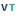
<style>
.page{position:relative;width:16px;height:16px;background:#ffffff}
.page>*{position:absolute;margin:0}
.t1{font:9.9px "MyriadPro-Bold";color:#2c3e50;scale:1.11 1}
.t2{font:9.9px "MyriadPro-Bold";color:#18bc9c;scale:1.11 1}
</style>
<div class="page">
<p class="t1" style="left:1px;top:4px;width:14px;height:7px">V <span class="t2">T</span></p>
</div>
